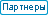
<style>
.page{position:relative;width:48px;height:15px;background:#ffffff}
.page>*{position:absolute;margin:0}
.t1{font:10px "ArialMT";letter-spacing:0.04em;color:#006699;scale:0.92 1}
</style>
<div class="page">
<p class="t1" style="left:3px;top:3px;width:42px;height:9px">Партнеры</p>
</div>
